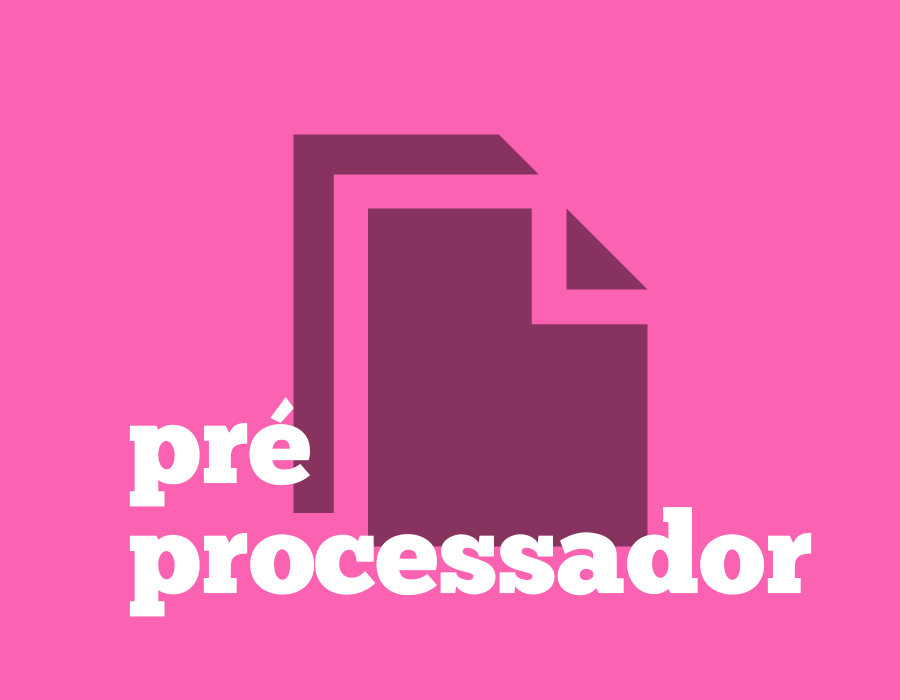
<style>
.page{position:relative;width:900px;height:700px;background:#fc62b2}
.page>*{position:absolute;margin:0}
.t1{font:114.4px "ChunkFive-Roman";color:#ffffff}
</style>
<div class="page">
<p class="t1" style="left:129px;top:397px;width:181px;height:110px">pré</p>
<p class="t1" style="left:129px;top:507px;width:683px;height:110px">processador</p>
</div>
